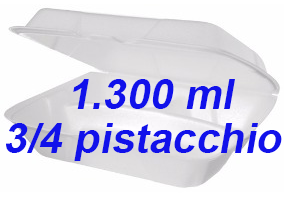
<style>
.page{position:relative;width:284px;height:204px;background:#fefefe}
.page>*{position:absolute;margin:0}
.t1{font:72px "Arial-BoldMT";color:#1111ea;font-style:italic}
</style>
<div class="page">
<p class="t1" style="left:73px;top:79px;width:162px;height:30px">1.300 ml</p>
<p class="t1" style="left:6px;top:123px;width:276px;height:38px">3/4 pistacchio</p>
</div>
